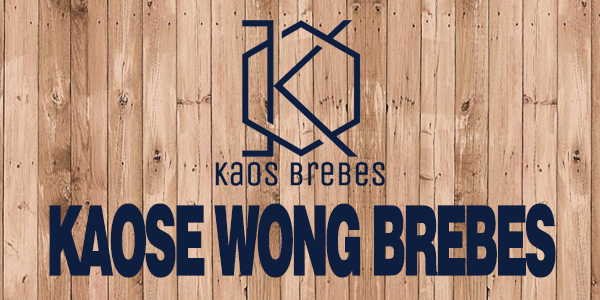
<style>
.page{position:relative;width:600px;height:300px}
.page>*{position:absolute;margin:0}
.t1{font:97.1px "Swiss721BT-Black";letter-spacing:-0.1em;color:#0e1e3f;font-weight:bold;scale:0.48 1}
</style>
<div class="page">
<p class="t1" style="left:49px;top:203px;width:507px;height:75px">KAOSE WONG BREBES</p>
</div>
